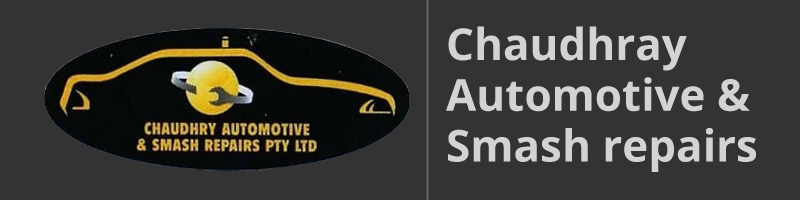
<style>
.page{position:relative;width:800px;height:200px;background:#333333}
.page>*{position:absolute;margin:0}
.t1{font:44px "OpenSans-Bold";color:#d3d3d3}
</style>
<div class="page">
<p class="t1" style="left:446px;top:26px;width:310px;height:146px">Chaudhray <br>Automotive &amp;<br>Smash repairs</p>
</div>
